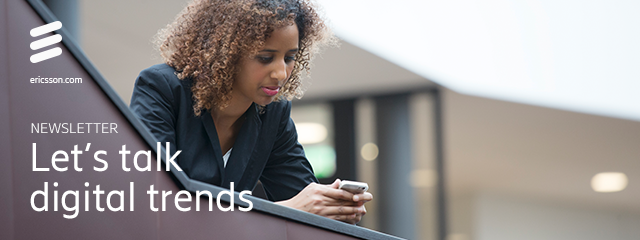
<style>
.page{position:relative;width:640px;height:240px}
.page>*{position:absolute;margin:0}
.t1{font:9.5px "EricssonHilda-Regular";color:#ffffff}
.t2{font:14px "EricssonHilda-Light";color:#ffffff}
.t3{font:40px/40px "EricssonHilda-Regular";color:#ffffff}
</style>
<div class="page">
<p class="t1" style="left:30px;top:76px;width:52px;height:7px">ericsson.com</p>
<p class="t2" style="left:31px;top:123px;width:87px;height:11px">NEWSLETTER</p>
<p class="t3" style="left:30px;top:142px;width:223px;height:77px">Let’s talk<br>digital trends</p>
</div>
